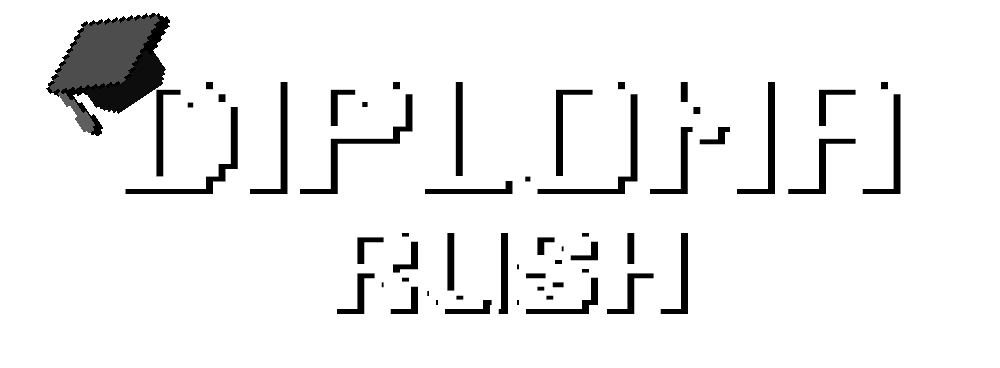
<style>
.page{position:relative;width:1000px;height:368px;background:#ffffff}
.page>*{position:absolute;margin:0}
.t1{font:100px "Phatone-Regular";color:#ffffff}
.t2{font:72px "Phatone-Regular";color:#ffffff}
</style>
<div class="page">
<p class="t1" style="left:118px;top:77px;width:776px;height:112px">DIPLOMA</p>
<p class="t2" style="left:330px;top:228px;width:351px;height:81px">RUSH</p>
</div>
